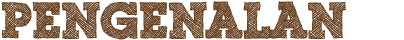
<style>
.page{position:relative;width:404px;height:40px;background:#ffffff}
.page>*{position:absolute;margin:0}
.t1{font:50px "ScribbleBoxDEMO";color:#684121}
</style>
<div class="page">
<p class="t1" style="left:1px;top:1px;width:345px;height:39px">Pengenalan</p>
</div>
